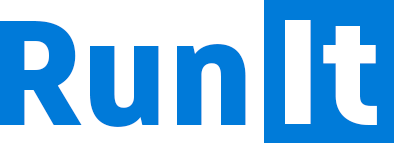
<style>
.page{position:relative;width:394px;height:143px;background:#ffffff}
.page>*{position:absolute;margin:0}
.t1{font:148.7px "Akrobat-Black";color:#007ad9;scale:1.21 1}
.t2{font:148.7px "Akrobat-Black";color:#ffffff;scale:1.21 1}
</style>
<div class="page">
<p class="t1" style="left:0px;top:21px;width:246px;height:106px">Run</p>
<p class="t2" style="left:285px;top:20px;width:92px;height:105px">It</p>
</div>
